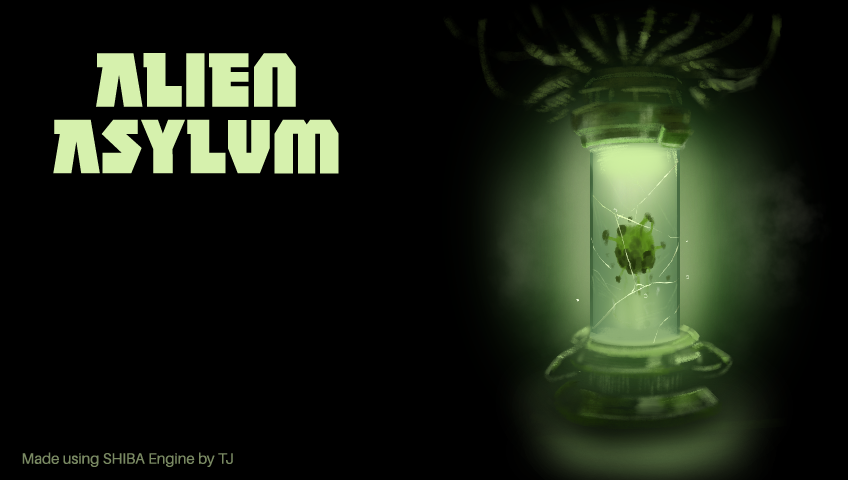
<style>
.page{position:relative;width:848px;height:480px;background:#000000}
.page>*{position:absolute;margin:0}
.t1{font:66.6px/66.6px "CCAchtungBabyMedium";color:#d6f1ad}
.t2{font:15.1px "Aileron-Regular";color:#798962}
</style>
<div class="page">
<p class="t1" style="left:53px;top:53px;width:286px;height:121px;text-align:center">ALIEN<br>ASYLUM</p>
<p class="t2" style="left:22px;top:452px;width:211px;height:15px">Made using SHIBA Engine by TJ</p>
</div>
